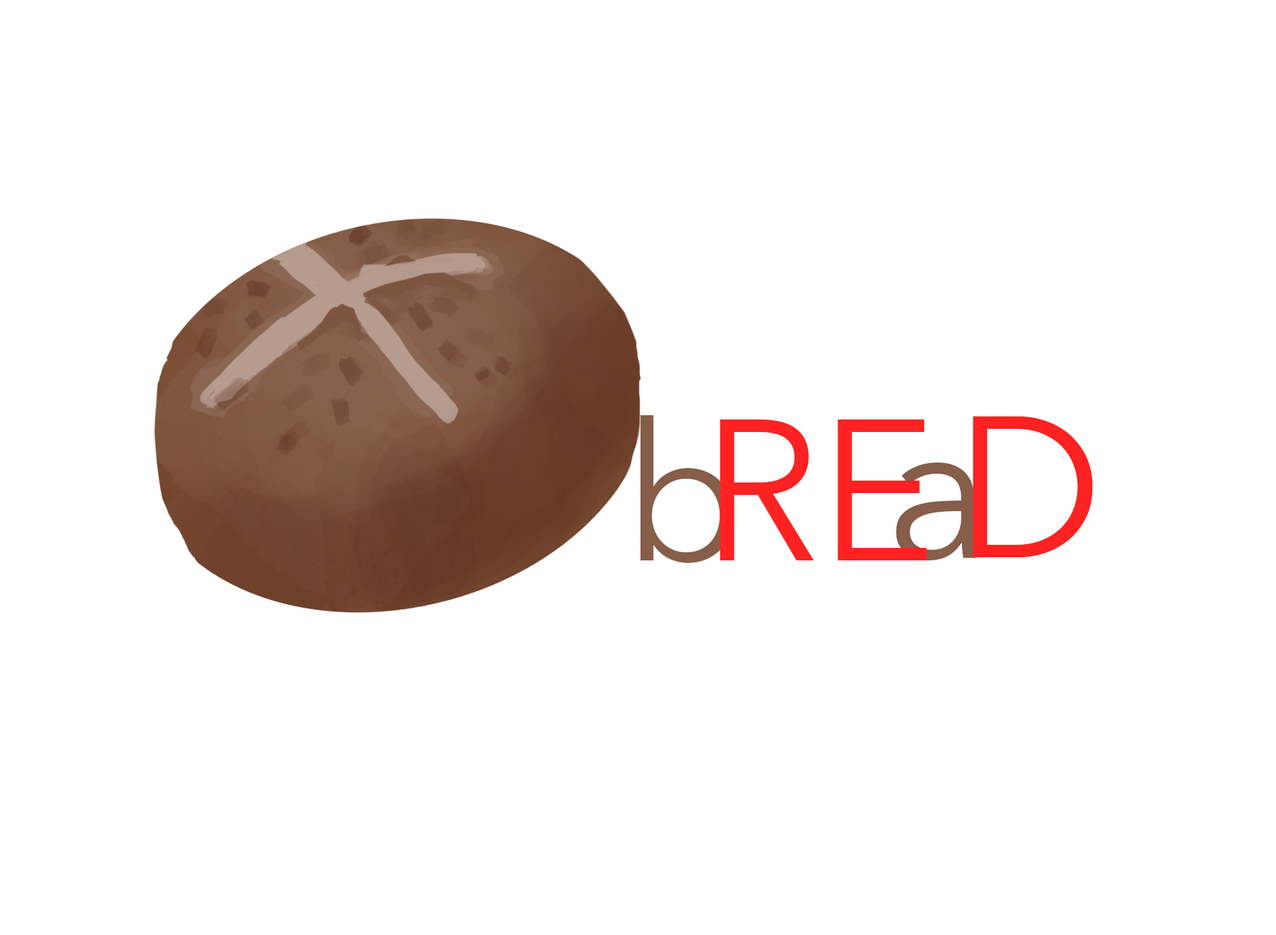
<style>
.page{position:relative;width:1276px;height:935px;background:#ffffff}
.page>*{position:absolute;margin:0}
.t1{font:191.9px "AvenirNext-Regular";color:#865e4a}
.t2{font:198.7px "AvenirNext-Regular";color:#fe2222}
.t3{font:198.7px "AvenirNext-Regular";color:#865e4a}
</style>
<div class="page">
<p class="t1" style="left:640px;top:415px;width:94px;height:148px">b</p>
<p class="t2" style="left:720px;top:419px;width:207px;height:141px">RE</p>
<p class="t2" style="left:973px;top:416px;width:120px;height:141px">D</p>
<p class="t3" style="left:896px;top:462px;width:80px;height:98px">a</p>
</div>
